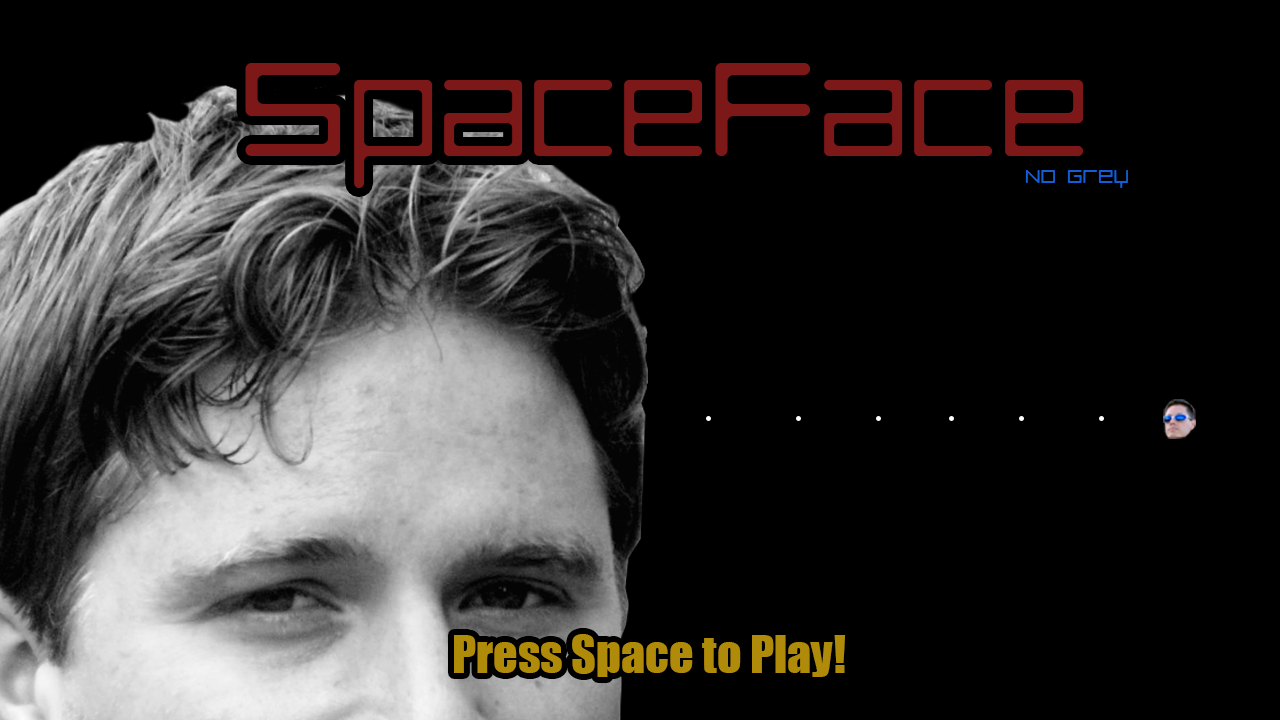
<style>
.page{position:relative;width:1280px;height:720px;background:#000000}
.page>*{position:absolute;margin:0}
.t1{font:140px "LuggageRoundLight";color:#7c1818}
.t2{font:170px "LuggageRoundLight";color:#7c1818}
.t3{font:24px "LuggageRoundLight";color:#155dd5}
.t4{font:48px "Impact";color:#b08b0a}
</style>
<div class="page">
<p class="t1" style="left:245px;top:63px;width:838px;height:125px"><span class="t2">S</span>pace<span class="t2">F</span>ace</p>
<p class="t3" style="left:1025px;top:170px;width:103px;height:18px">No Grey</p>
<p class="t4" style="left:454px;top:634px;width:392px;height:43px">Press Space to Play!</p>
</div>
